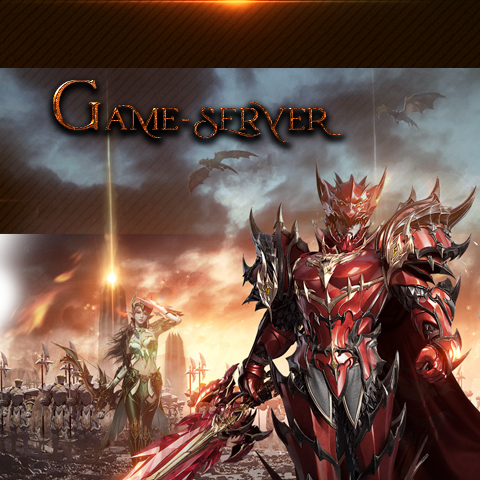
<style>
.page{position:relative;width:480px;height:480px}
.page>*{position:absolute;margin:0}
.t1{font:30px "MTD-Hello-Paris-Serif";font-weight:bold;scale:1.17 1}
.t2{font:60px "MTD-Hello-Paris-Serif";font-weight:bold;scale:1.17 1}
</style>
<div class="page">
<p class="t1" style="left:53px;top:80px;width:291px;height:62px"><span class="t2">G</span>aMe-SErVeR</p>
</div>
